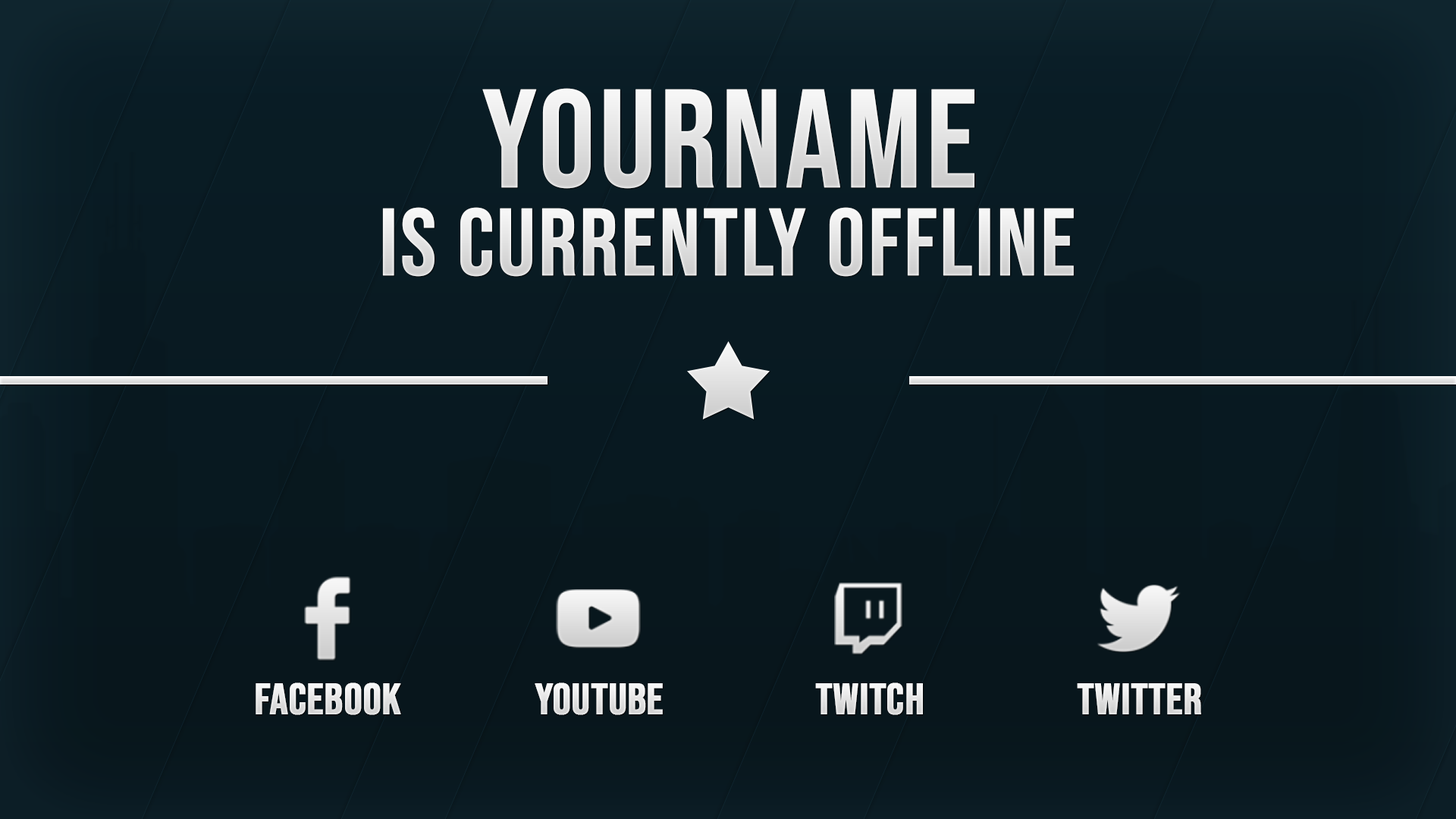
<style>
.page{position:relative;width:1456px;height:819px}
.page>*{position:absolute;margin:0}
.t1{font:140.1px "BebasNeue-Regular";color:#e6e6e6;text-transform:uppercase;font-weight:bold}
.t2{font:95.3px "BebasNeue-Regular";color:#e8e8e8;text-transform:uppercase;font-weight:bold}
.t3{font:44.1px "BebasNeue-Regular";color:#ffffff;text-transform:uppercase;font-weight:bold}
</style>
<div class="page">
<p class="t1" style="left:482px;top:88px;width:492px;height:101px">YOURNAME</p>
<p class="t2" style="left:382px;top:207px;width:692px;height:70px">IS CURRENTLY OFFLINE</p>
<p class="t3" style="left:256px;top:682px;width:145px;height:33px">FACEBOOK</p>
<p class="t3" style="left:535px;top:682px;width:128px;height:33px">YOUTUBE</p>
<p class="t3" style="left:815px;top:682px;width:108px;height:33px">TWITCH</p>
<p class="t3" style="left:1077px;top:683px;width:124px;height:31px">TWITTER</p>
</div>
